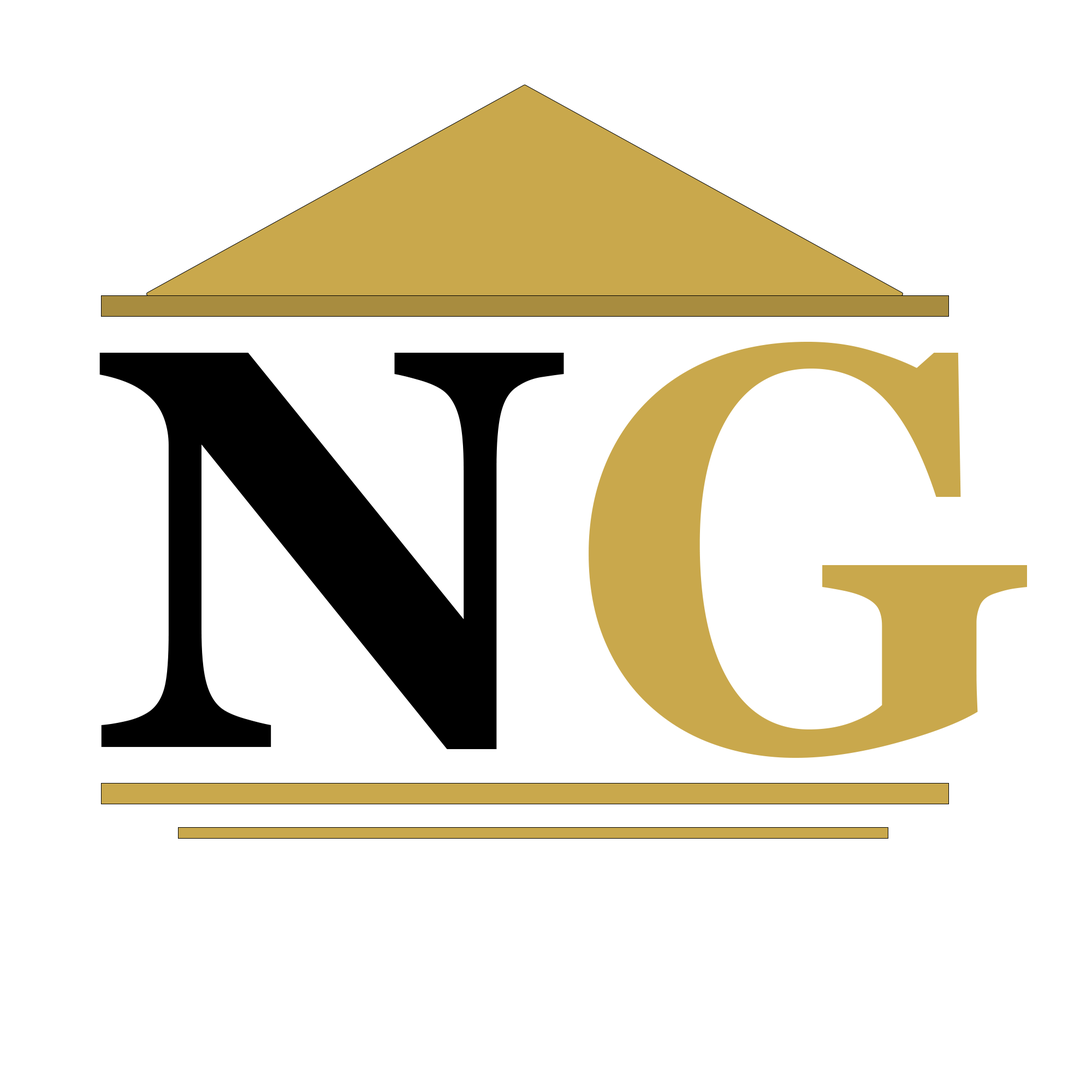
<style>
.page{position:relative;width:1092px;height:1092px;background:#ffffff}
.page>*{position:absolute;margin:0}
.t1{font:568.7px "Georgia-Bold";color:#000000}
.t2{font:568.7px "Georgia-Bold";color:#c9a84c}
</style>
<div class="page">
<p class="t1" style="left:99px;top:342px;width:928px;height:416px">N<span class="t2">G</span></p>
</div>
